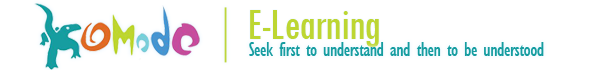
<style>
.page{position:relative;width:600px;height:70px;background:#ffffff}
.page>*{position:absolute;margin:0}
.t1{font:45.8px "TwCenMT-Condensed";letter-spacing:-0.025em;color:#bdd632}
.t2{font:20.8px "GillSansMT-Condensed";letter-spacing:-0.025em;color:#169da0}
</style>
<div class="page">
<p class="t1" style="left:250px;top:10px;width:129px;height:37px">E-Learning</p>
<p class="t2" style="left:249px;top:42px;width:295px;height:14px">Seek first to understand and then to be understood</p>
</div>
